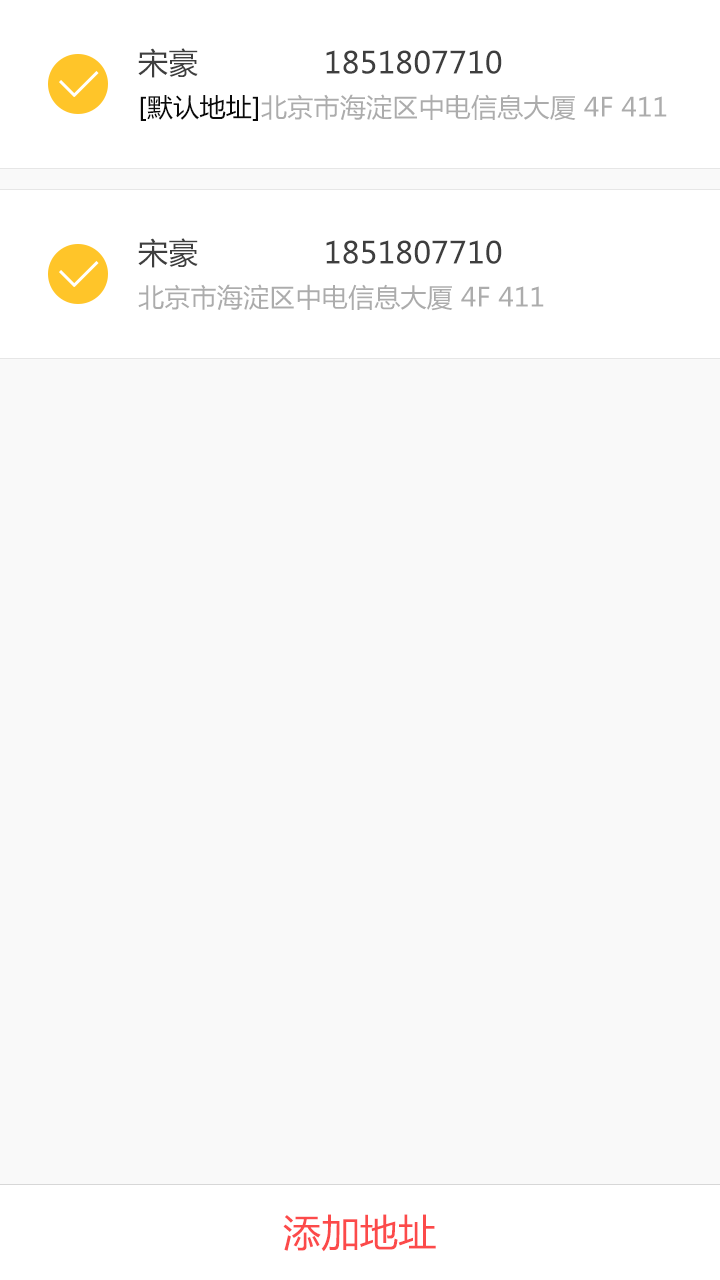
<style>
.page{position:relative;width:720px;height:1280px;background:#f9f9f9}
.page>*{position:absolute;margin:0}
.t1{font:30px "MicrosoftYaHei";letter-spacing:0.01em;color:#3e3e3e}
.t2{font:26px "MicrosoftYaHei";letter-spacing:0.01em;color:#acacac}
.t3{font:26px "MicrosoftYaHei";letter-spacing:0.01em;color:#0a0a0a}
.t4{font:38px "MicrosoftYaHei";letter-spacing:0.01em;color:#fc4a4a}
</style>
<div class="page">
<p class="t1" style="left:138px;top:48px;width:60px;height:30px">宋豪</p>
<p class="t1" style="left:326px;top:50px;width:176px;height:24px">1851807710</p>
<p class="t2" style="left:140px;top:94px;width:527px;height:27px"><span class="t3">[默认地址]</span>北京市海淀区中电信息大厦 4F 411</p>
<p class="t1" style="left:138px;top:238px;width:60px;height:30px">宋豪</p>
<p class="t1" style="left:326px;top:240px;width:176px;height:24px">1851807710</p>
<p class="t2" style="left:138px;top:284px;width:406px;height:27px">北京市海淀区中电信息大厦 4F 411</p>
<p class="t4" style="left:283px;top:1214px;width:153px;height:38px">添加地址</p>
</div>
